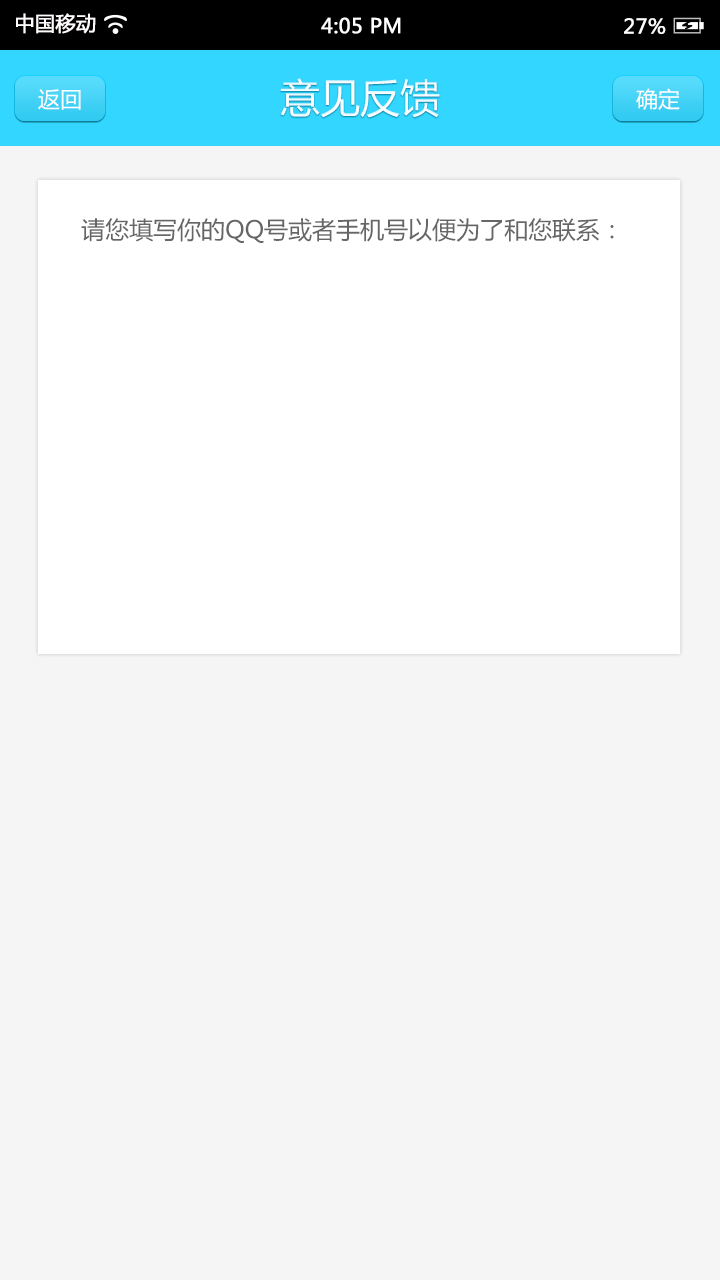
<style>
.page{position:relative;width:720px;height:1280px;background:#f5f5f5}
.page>*{position:absolute;margin:0}
.t1{font:20px "MicrosoftYaHei";color:#fffcfc;font-weight:bold}
.t2{font:20px "MicrosoftYaHei";color:#ffffff;font-weight:bold}
.t3{font:20px "MicrosoftYaHei";color:#fffefe;font-weight:bold}
.t4{font:40px "MicrosoftYaHei";color:#ffffff}
.t5{font:22px "MicrosoftYaHei";color:#ffffff}
.t6{font:24px "MicrosoftYaHei";color:#666666}
</style>
<div class="page">
<p class="t1" style="left:16px;top:13px;width:80px;height:21px">中国移动</p>
<p class="t2" style="left:321px;top:17px;width:80px;height:17px">4:05 PM</p>
<p class="t3" style="left:624px;top:18px;width:42px;height:16px">27%</p>
<p class="t4" style="left:280px;top:78px;width:160px;height:40px">意见反馈</p>
<p class="t5" style="left:38px;top:89px;width:43px;height:21px">返回</p>
<p class="t5" style="left:636px;top:88px;width:44px;height:22px">确定</p>
<p class="t6" style="left:81px;top:218px;width:533px;height:25px">请您填写你的QQ号或者手机号以便为了和您联系：</p>
</div>
